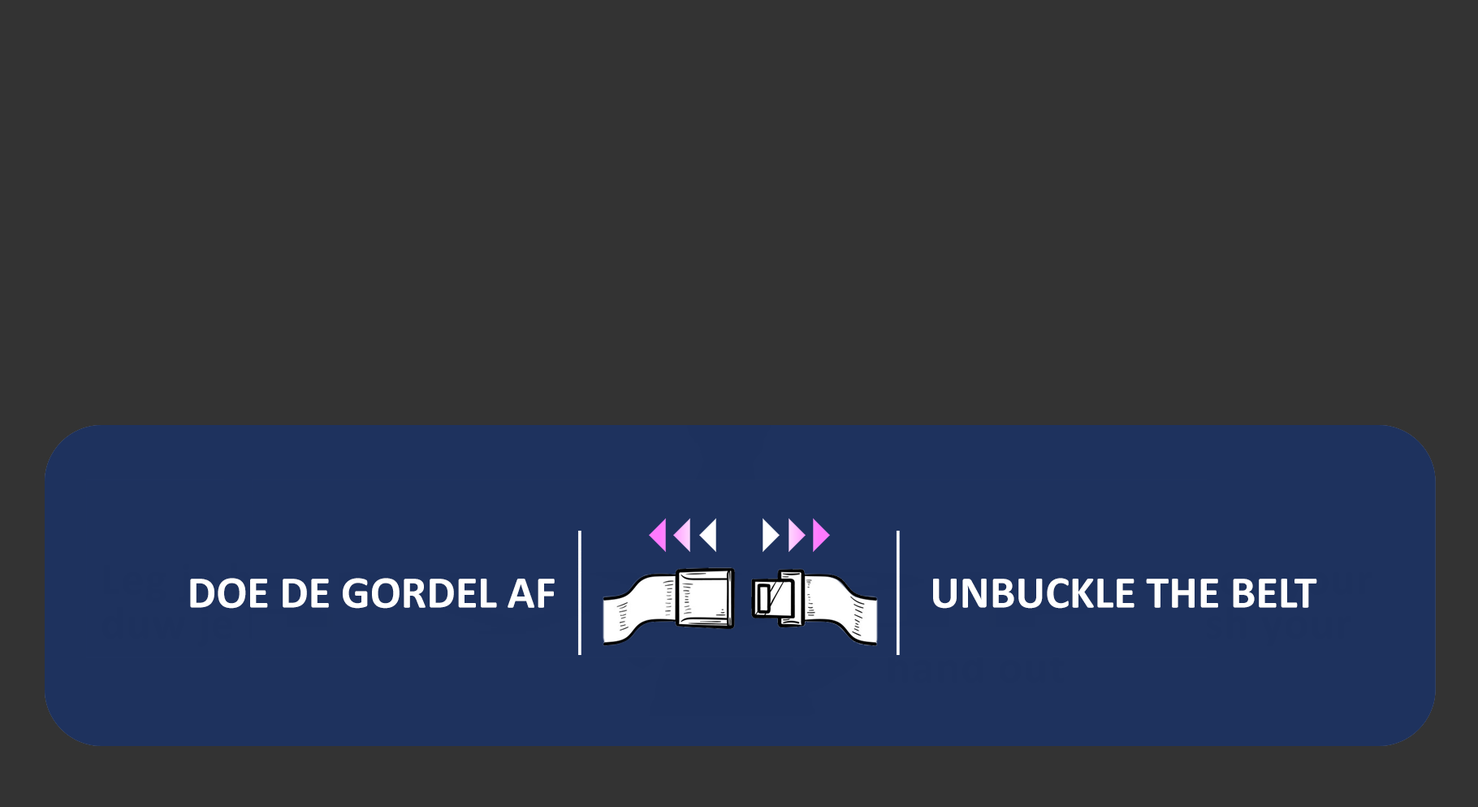
<style>
.page{position:relative;width:1478px;height:807px;background:#333333}
.page>*{position:absolute;margin:0}
.t1{font:45.3px "Calibri-Bold";color:#ffffff}
</style>
<div class="page">
<p class="t1" style="left:190px;top:578px;width:365px;height:30px">DOE DE GORDEL AF</p>
<p class="t1" style="left:933px;top:578px;width:385px;height:30px">UNBUCKLE THE BELT</p>
</div>
